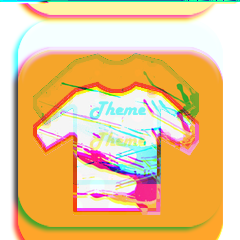
<style>
.page{position:relative;width:240px;height:240px;background:#f5a52a}
.page>*{position:absolute;margin:0}
.t1{font:20px "HarlowSolid"}
</style>
<div class="page">
<p class="t1" style="left:89px;top:99px;width:57px;height:19px">Theme</p>
</div>
